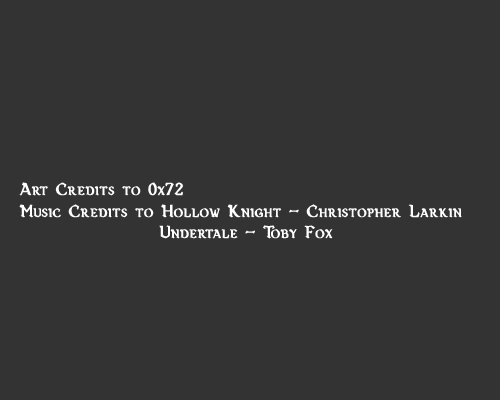
<style>
.page{position:relative;width:500px;height:400px;background:#333333}
.page>*{position:absolute;margin:0}
.t1{font:18px "Vecna-Bold";color:#ffffff;font-weight:bold}
</style>
<div class="page">
<p class="t1" style="left:19px;top:182px;width:443px;height:57px">Art Credits to 0x72<br>Music Credits to Hollow Knight - Christopher Larkin<br>       Undertale - Toby Fox</p>
</div>
